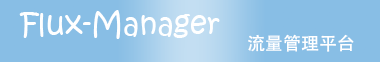
<style>
.page{position:relative;width:380px;height:62px;background:#88bee5}
.page>*{position:absolute;margin:0}
.t1{font:30px "KristenITC-Regular";color:#ffffff}
.t2{font:18px "AdobeHeitiStd-Regular";color:#ffffff}
</style>
<div class="page">
<p class="t1" style="left:19px;top:10px;width:201px;height:29px">Flux-Manager</p>
<p class="t2" style="left:248px;top:34px;width:106px;height:18px">流量管理平台</p>
</div>
